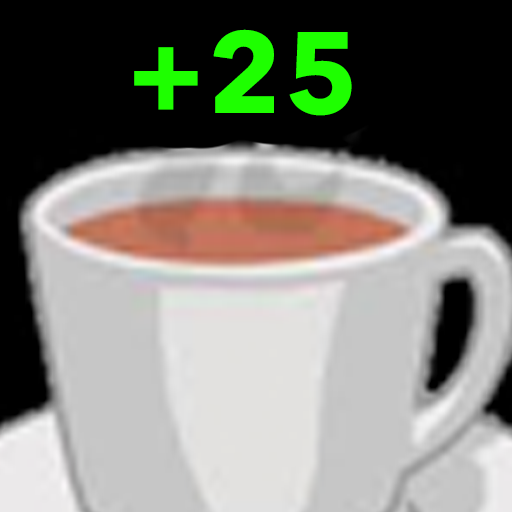
<style>
.page{position:relative;width:512px;height:512px;background:#000000}
.page>*{position:absolute;margin:0}
.t1{font:114px "AvenirNext-Bold";letter-spacing:0.034em;color:#1eff00}
</style>
<div class="page">
<p class="t1" style="left:134px;top:29px;width:218px;height:87px">+25</p>
</div>
